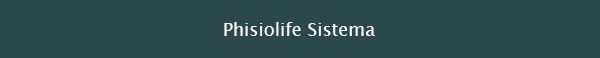
<style>
.page{position:relative;width:600px;height:58px;background:#2b484c}
.page>*{position:absolute;margin:0}
.t1{font:18px "LucidaSansUnicode";color:#ffffff}
</style>
<div class="page">
<p class="t1" style="left:224px;top:22px;width:151px;height:14px">Phisiolife Sistema</p>
</div>
